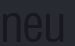
<style>
.page{position:relative;width:75px;height:46px;background:#282a32}
.page>*{position:absolute;margin:0}
.t1{font:50px "Swiss721BT-RomanCondensed";letter-spacing:-0.03em;color:#18191e}
</style>
<div class="page">
<p class="t1" style="left:3px;top:13px;width:61px;height:29px">neu</p>
</div>
